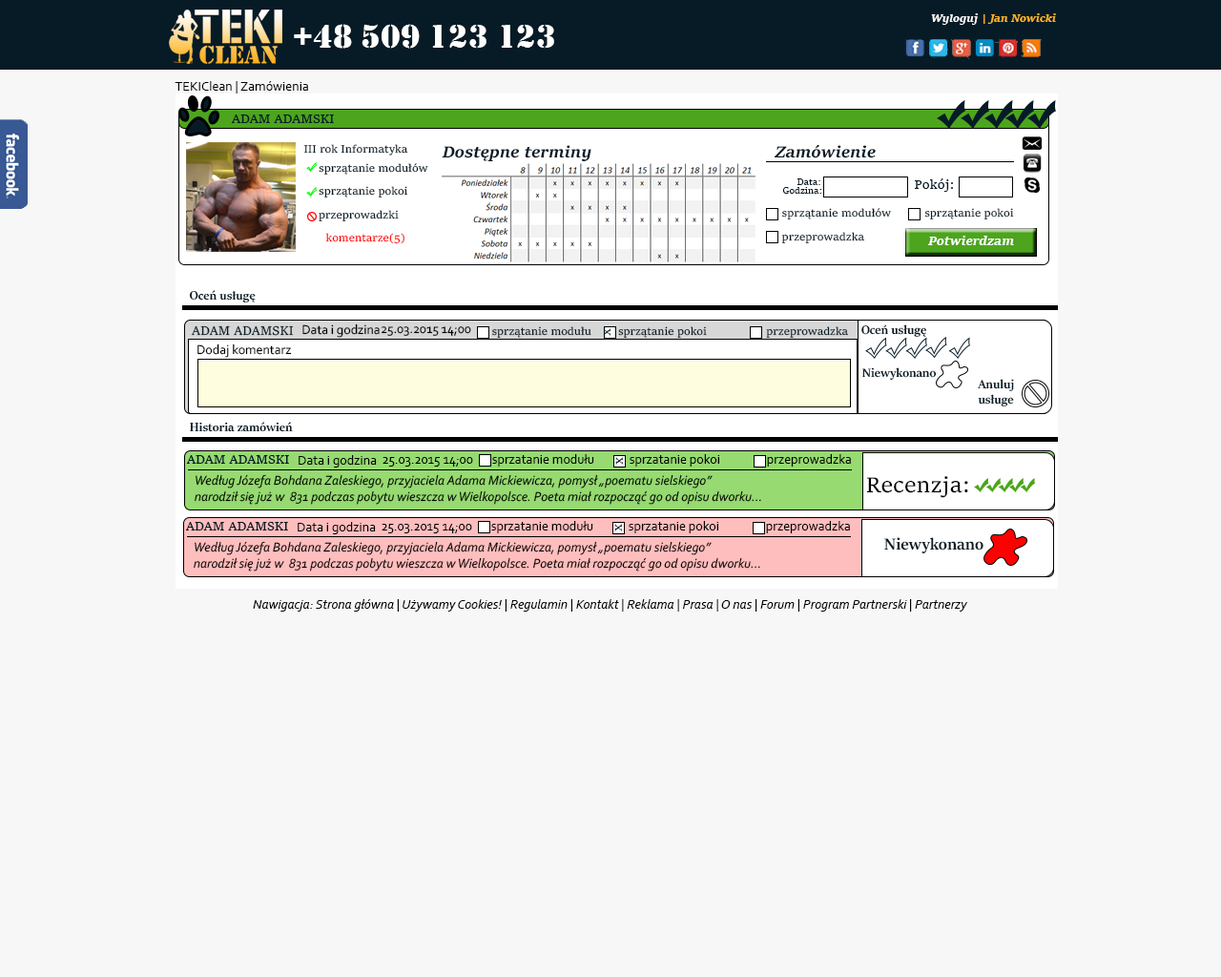
<style>
.page{position:relative;width:1221px;height:977px;background:#f7f7f7}
.page>*{position:absolute;margin:0}
.t1{font:11.4px "SitkaText-BoldItalic";color:#fcb324}
.t2{font:11.4px "SitkaText-BoldItalic";color:#ffffff}
.t3{font:34.3px "Stencil";color:#ffffff}
.t4{font:13.4px "Corbel";color:#010000}
.t5{font:13.4px "SitkaText";color:#071b26}
.t6{font:11.4px "SitkaText";color:#071b26}
.t7{font:17.2px "SitkaText-BoldItalic";color:#071b26}
.t8{font:11.4px/23.7px "SitkaText";color:#071b26}
.t9{font:9.5px "SitkaText";color:#071b26}
.t10{font:13.8px "SitkaText";color:#071b26}
.t11{font:11.4px "SitkaText";color:#ff0000}
.t12{font:13.4px "SitkaText-BoldItalic";color:#ffffff}
.t13{font:13.4px "SitkaBanner-Bold";color:#071b26}
.t14{font:13.4px "Corbel";color:#000000}
.t15{font:13.4px "Corbel-Italic";color:#000000}
.t16{font:23.4px "SitkaText";color:#000000}
.t17{font:18px "SitkaBanner-Bold";color:#071b26}
.t18{font:13.4px "Corbel-Italic";color:#010101}
</style>
<div class="page">
<p class="t1" style="left:931px;top:13px;width:125px;height:12px"><span class="t2">Wyloguj </span>| Jan Nowicki</p>
<p class="t3" style="left:294px;top:24px;width:260px;height:25px">+48 509 123 123</p>
<p class="t4" style="left:175px;top:81px;width:133px;height:12px">TEKIClean | Zamówienia</p>
<p class="t5" style="left:231px;top:114px;width:103px;height:9px">ADAM ADAMSKI</p>
<p class="t6" style="left:303px;top:144px;width:105px;height:11px">III rok Informatyka</p>
<p class="t7" style="left:442px;top:145px;width:149px;height:16px">Dostępne terminy</p>
<p class="t7" style="left:774px;top:145px;width:102px;height:13px">Zamówienie</p>
<p class="t8" style="left:319px;top:163px;width:109px;height:58px">sprzątanie modułów<br>sprzątanie pokoi<br>przeprowadzki</p>
<p class="t9" style="left:796px;top:178px;width:24px;height:7px">Data:</p>
<p class="t10" style="left:915px;top:178px;width:38px;height:14px">Pokój:</p>
<p class="t9" style="left:782px;top:187px;width:39px;height:7px">Godzina:</p>
<p class="t8" style="left:781px;top:208px;width:233px;height:35px">sprzątanie modułów  sprzątanie pokoi<br>przeprowadzka</p>
<p class="t11" style="left:325px;top:233px;width:79px;height:11px">komentarze(5)</p>
<p class="t12" style="left:927px;top:236px;width:87px;height:9px">Potwierdzam</p>
<p class="t13" style="left:189px;top:290px;width:67px;height:12px">Oceń usługę</p>
<p class="t5" style="left:191px;top:325px;width:103px;height:11px">ADAM ADAMSKI</p>
<p class="t14" style="left:302px;top:323px;width:78px;height:15px">Data i godzina</p>
<p class="t14" style="left:381px;top:326px;width:90px;height:10px">25.03.2015 14;00</p>
<p class="t6" style="left:492px;top:326px;width:357px;height:12px">sprzątanie modułu     sprzątanie pokoi        przeprowadzka</p>
<p class="t10" style="left:603px;top:328px;width:7px;height:8px">x</p>
<p class="t13" style="left:861px;top:324px;width:65px;height:14px">Oceń usługę</p>
<p class="t14" style="left:197px;top:343px;width:95px;height:15px">Dodaj komentarz</p>
<p class="t13" style="left:862px;top:367px;width:75px;height:14px">Niewykonano</p>
<p class="t13" style="left:978px;top:379px;width:36px;height:28px">Anuluj<br>usługe</p>
<p class="t13" style="left:190px;top:422px;width:103px;height:9px">Historia zamówień</p>
<p class="t5" style="left:186px;top:455px;width:103px;height:9px">ADAM ADAMSKI</p>
<p class="t14" style="left:299px;top:455px;width:78px;height:12px">Data i godzina</p>
<p class="t14" style="left:382px;top:457px;width:91px;height:9px">25.03.2015 14;00</p>
<p class="t14" style="left:492px;top:454px;width:359px;height:12px">sprzatanie modułu  sprzatanie pokoi   przeprowadzka</p>
<p class="t10" style="left:615px;top:457px;width:8px;height:8px">x</p>
<p class="t15" style="left:195px;top:474px;width:566px;height:31px">Według Józefa Bohdana Zaleskiego, przyjaciela Adama Mickiewicza, pomysł „poematu sielskiego” <br>narodził się już w  831 podczas pobytu wieszcza w Wielkopolsce. Poeta miał rozpocząć go od opisu dworku...</p>
<p class="t16" style="left:866px;top:476px;width:102px;height:22px">Recenzja:</p>
<p class="t5" style="left:185px;top:522px;width:103px;height:8px">ADAM ADAMSKI</p>
<p class="t14" style="left:298px;top:522px;width:78px;height:12px">Data i godzina</p>
<p class="t14" style="left:491px;top:521px;width:359px;height:12px">sprzatanie modułu  sprzatanie pokoi   przeprowadzka</p>
<p class="t14" style="left:382px;top:524px;width:90px;height:9px">25.03.2015 14;00</p>
<p class="t10" style="left:614px;top:524px;width:8px;height:7px">x</p>
<p class="t15" style="left:194px;top:541px;width:566px;height:30px">Według Józefa Bohdana Zaleskiego, przyjaciela Adama Mickiewicza, pomysł „poematu sielskiego” <br>narodził się już w  831 podczas pobytu wieszcza w Wielkopolsce. Poeta miał rozpocząć go od opisu dworku...</p>
<p class="t17" style="left:884px;top:537px;width:99px;height:16px">Niewykonano</p>
<p class="t18" style="left:253px;top:599px;width:715px;height:12px">Nawigacja: Strona główna | Używamy Cookies! | Regulamin | Kontakt | Reklama | Prasa | O nas | Forum | Program Partnerski | Partnerzy</p>
</div>
